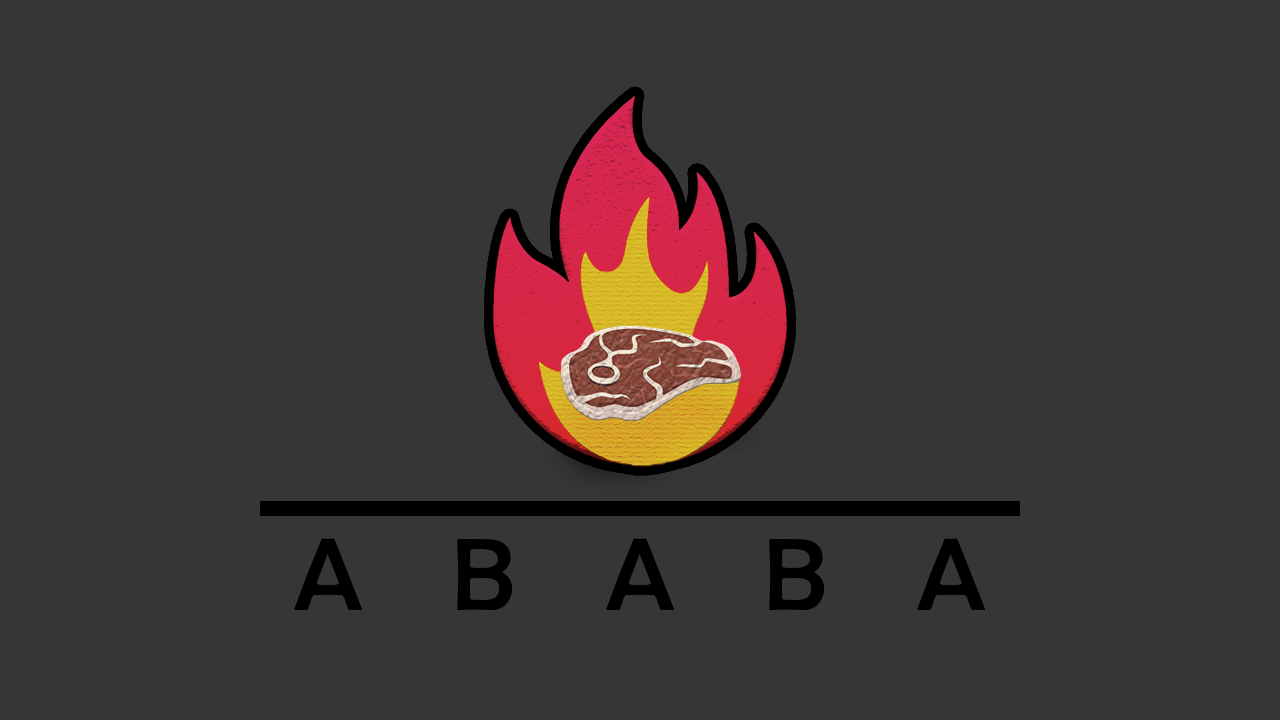
<style>
.page{position:relative;width:1280px;height:720px;background:#363636}
.page>*{position:absolute;margin:0}
.t1{font:104.2px "BerlinSansFB-Reg";letter-spacing:0.86em;color:#000000}
</style>
<div class="page">
<p class="t1" style="left:294px;top:538px;width:692px;height:72px">ABABA</p>
</div>
